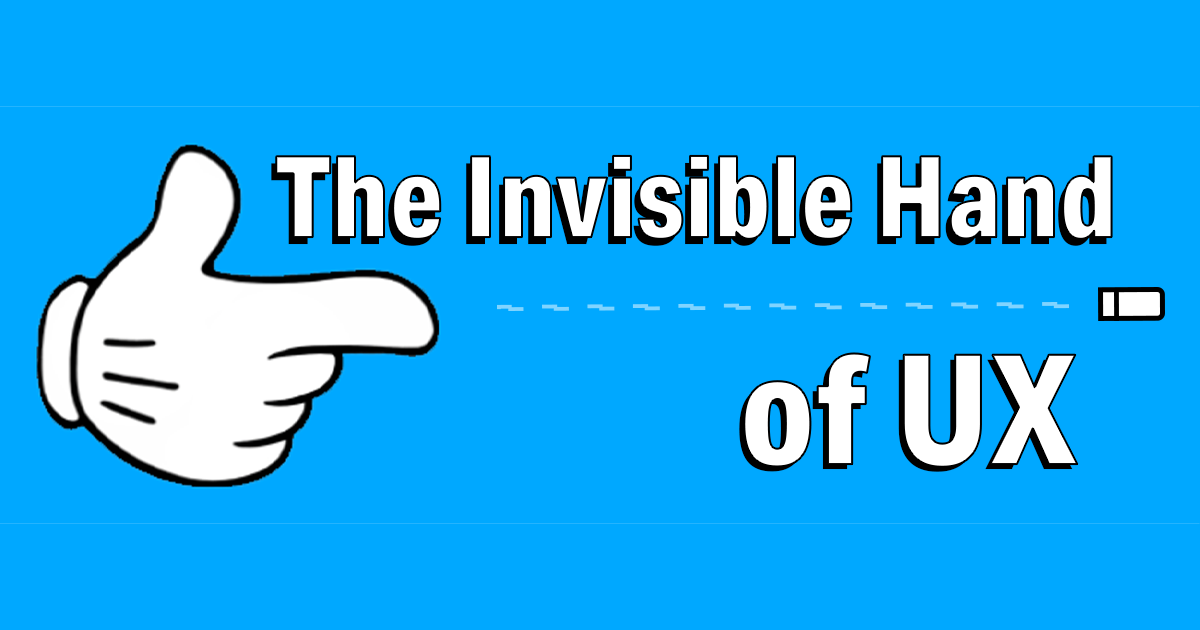
<style>
.page{position:relative;width:1200px;height:630px;background:#00a8ff}
.page>*{position:absolute;margin:0}
.t1{font:113.1px "AktivGroteskCd-XBold";letter-spacing:0.01em;color:#ffffff}
.t2{font:113.1px "AktivGroteskCd-XBold";letter-spacing:0.01em}
.t3{font:152.5px "AktivGroteskCd-XBold";letter-spacing:0.01em;color:#ffffff}
</style>
<div class="page">
<p class="t1" style="left:276px;top:155px;width:836px;height:84px">The Invisible Hand</p>
<p class="t2" style="left:271px;top:162px;width:836px;height:84px">The Invisible Hand</p>
<p class="t3" style="left:744px;top:353px;width:334px;height:114px">of UX</p>
<p class="t3" style="left:739px;top:358px;width:334px;height:114px">of UX</p>
</div>
